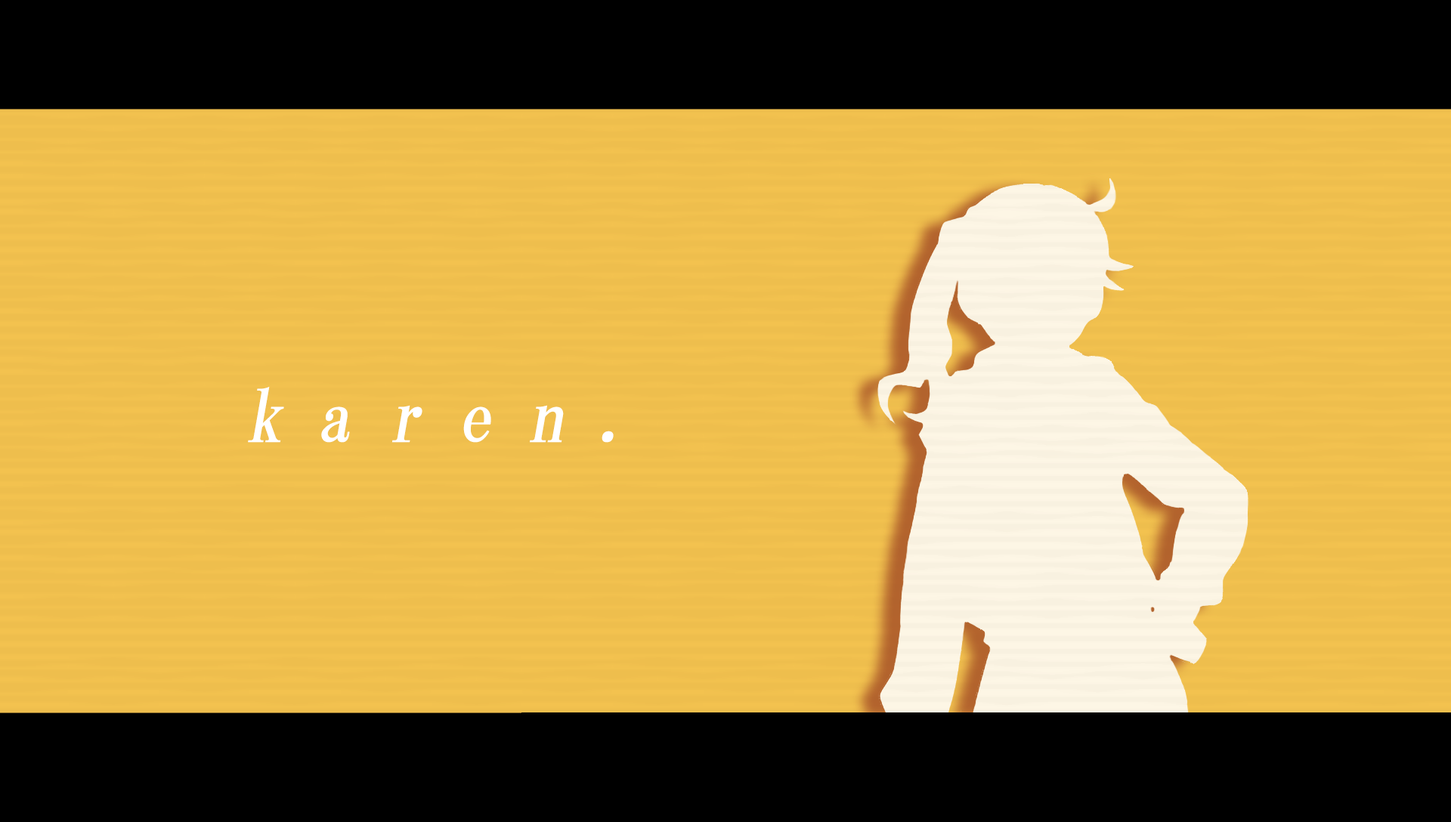
<style>
.page{position:relative;width:1451px;height:822px;background:#000000}
.page>*{position:absolute;margin:0}
.t1{font:72.5px "HGMinchoB";letter-spacing:0.47em;color:#ffffff;font-style:italic}
</style>
<div class="page">
<p class="t1" style="left:248px;top:387px;width:365px;height:56px">karen.</p>
</div>
